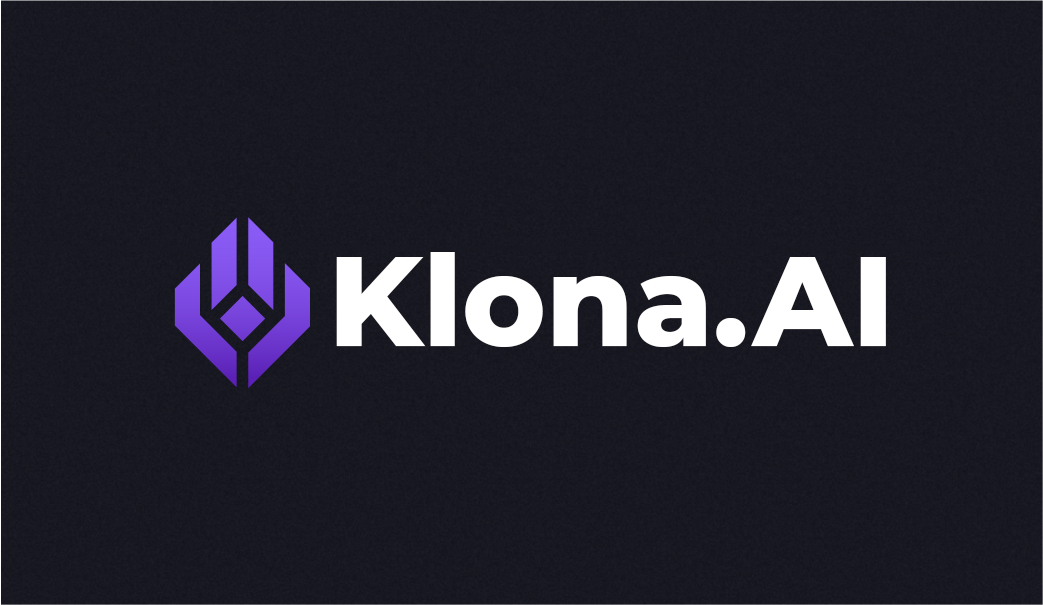
<style>
.page{position:relative;width:1043px;height:605px}
.page>*{position:absolute;margin:0}
.t1{font:126.1px "Montserrat-ExtraBold";color:#ffffff}
</style>
<div class="page">
<p class="t1" style="left:336px;top:252px;width:550px;height:95px">Klona.AI</p>
</div>
